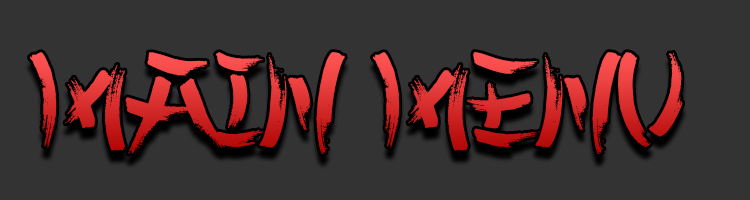
<style>
.page{position:relative;width:750px;height:200px;background:#333333}
.page>*{position:absolute;margin:0}
.t1{font:134.7px "ChineseTakeaway";scale:1.07 1}
</style>
<div class="page">
<p class="t1" style="left:30px;top:52px;width:653px;height:102px">main menu</p>
</div>
